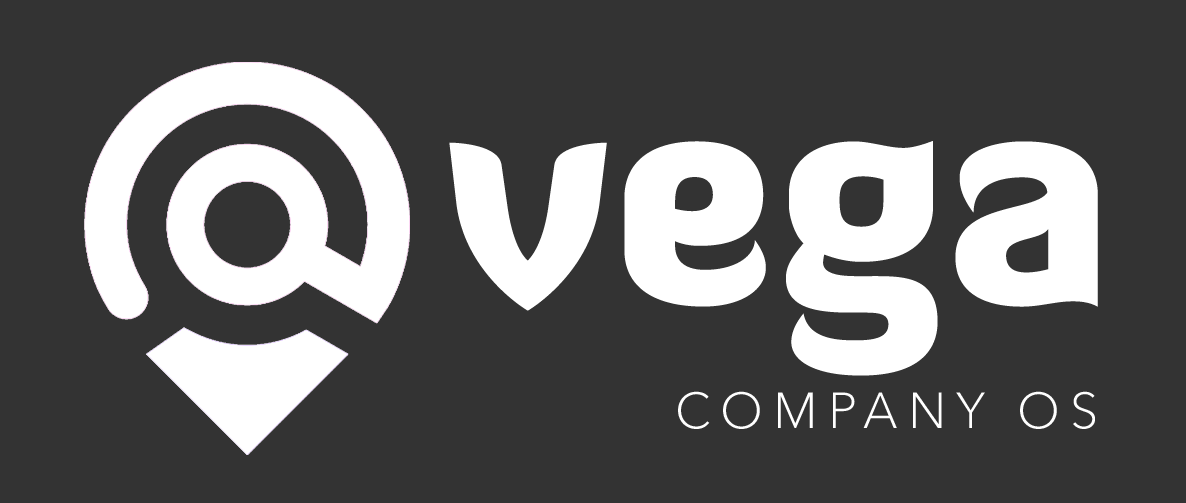
<style>
.page{position:relative;width:1186px;height:503px;background:#333333}
.page>*{position:absolute;margin:0}
.t1{font:300px "DiavloBlack-Regular";color:#ffffff}
.t2{font:50px "AvenirNextLTPro-Light";letter-spacing:0.2em;color:#ffffff}
</style>
<div class="page">
<p class="t1" style="left:449px;top:141px;width:649px;height:235px">vega</p>
<p class="t2" style="left:678px;top:391px;width:417px;height:38px">COMPANY OS</p>
</div>
